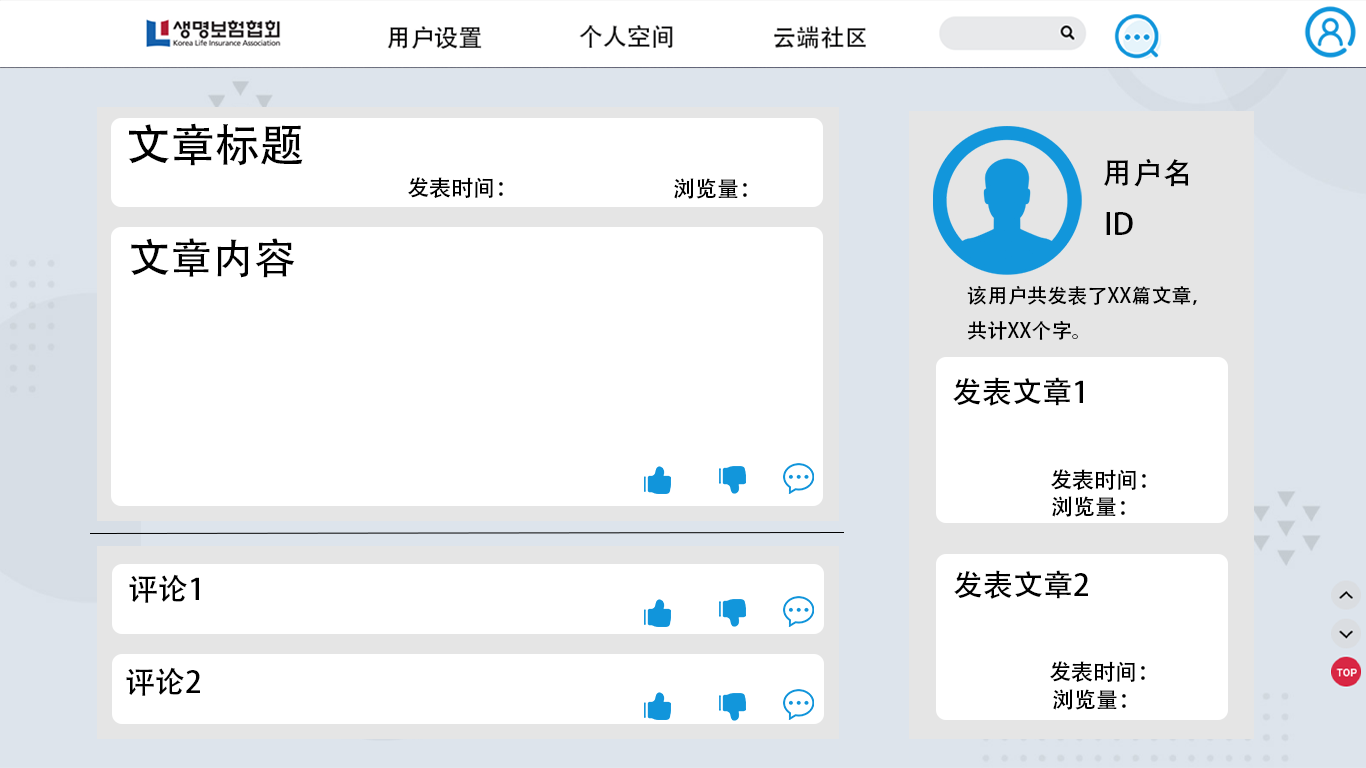
<style>
.page{position:relative;width:1366px;height:768px;background:#ffffff}
.page>*{position:absolute;margin:0}
.t1{font:45px "AdobeHeitiStd-Regular";color:#000000}
.t2{font:30px "AdobeHeitiStd-Regular";color:#000000}
.t3{font:22px "AdobeHeitiStd-Regular";color:#000000}
.t4{font:42px "AdobeHeitiStd-Regular";color:#000000}
.t5{font:20px "AdobeHeitiStd-Regular";color:#000000}
</style>
<div class="page">
<p class="t1" style="left:128px;top:123px;width:175px;height:43px">文章标题</p>
<p class="t2" style="left:1104px;top:159px;width:85px;height:28px">用户名</p>
<p class="t3" style="left:408px;top:177px;width:95px;height:21px">发表时间：</p>
<p class="t3" style="left:674px;top:178px;width:73px;height:21px">浏览量：</p>
<p class="t2" style="left:1106px;top:212px;width:27px;height:23px">ID</p>
<p class="t4" style="left:131px;top:238px;width:164px;height:40px">文章内容</p>
<p class="t5" style="left:967px;top:285px;width:230px;height:55px">该用户共发表了XX篇文章，<br>共计XX个字。</p>
<p class="t2" style="left:953px;top:377px;width:130px;height:29px">发表文章1</p>
<p class="t3" style="left:1051px;top:469px;width:95px;height:21px">发表时间：</p>
<p class="t3" style="left:1052px;top:496px;width:73px;height:21px">浏览量：</p>
<p class="t2" style="left:129px;top:574px;width:70px;height:29px">评论1</p>
<p class="t2" style="left:954px;top:570px;width:134px;height:29px">发表文章2</p>
<p class="t3" style="left:1050px;top:661px;width:95px;height:21px">发表时间：</p>
<p class="t2" style="left:126px;top:667px;width:74px;height:29px">评论2</p>
<p class="t3" style="left:1053px;top:689px;width:73px;height:21px">浏览量：</p>
</div>
